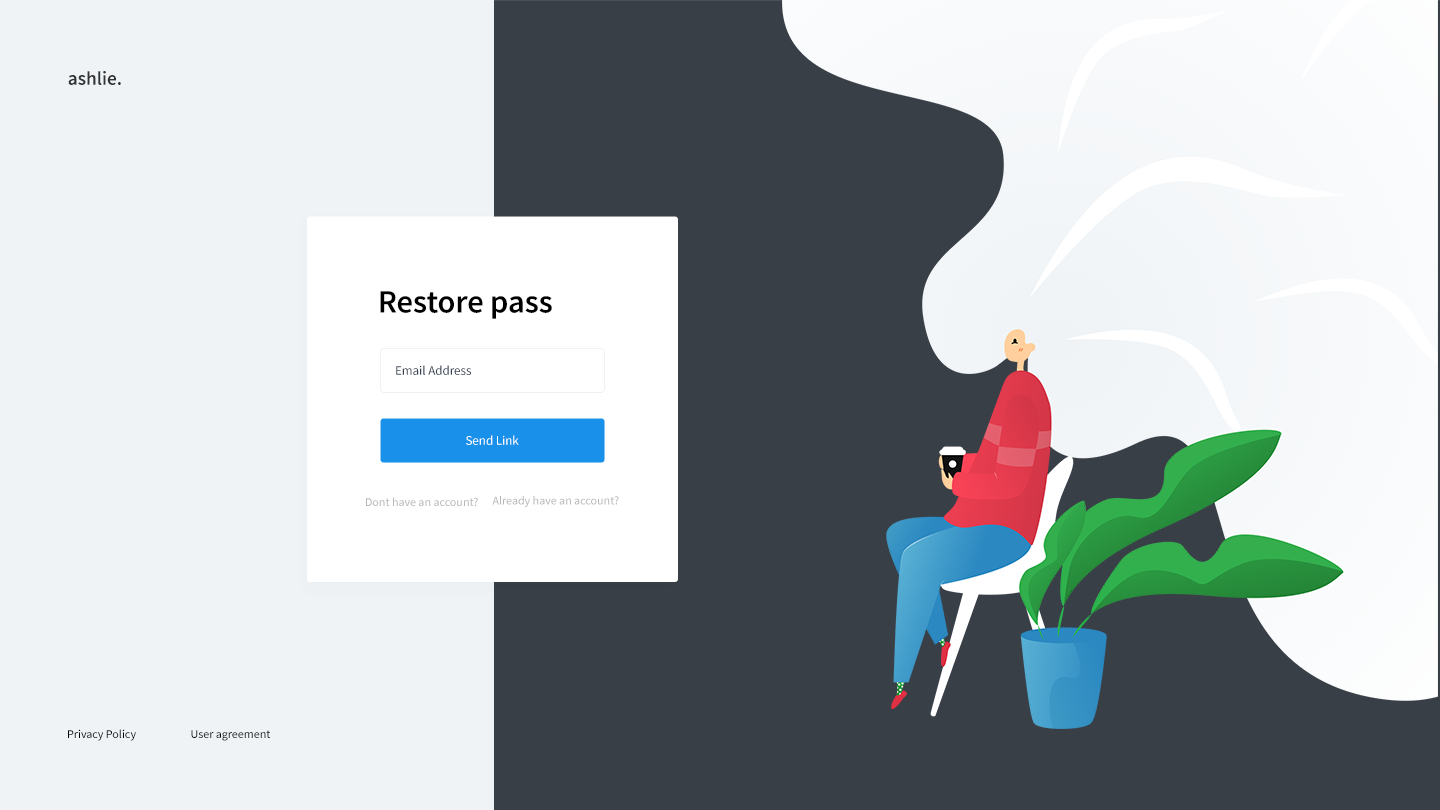
<style>
.page{position:relative;width:1440px;height:810px;background:#393f47}
.page>*{position:absolute;margin:0}
.t1{font:19.3px "SourceSansPro-SemiBold";color:#333333}
.t2{font:32.5px "SourceSansPro-SemiBold";color:#000000}
.t3{font:13px "SourceSansPro-Regular";color:#354052}
.t4{font:13px "SourceSansPro-Regular";color:#ffffff}
.t5{font:12px "SourceSansPro-Regular";color:#b6b6b6}
.t6{font:12px "SourceSansPro-Regular";color:#000000}
</style>
<div class="page">
<p class="t1" style="left:68px;top:71px;width:53px;height:14px">ashlie.</p>
<p class="t2" style="left:380px;top:291px;width:172px;height:28px">Restore pass</p>
<p class="t3" style="left:396px;top:365px;width:75px;height:10px">Email Address</p>
<p class="t4" style="left:466px;top:435px;width:53px;height:10px">Send Link</p>
<p class="t5" style="left:366px;top:497px;width:112px;height:9px">Dont have an account?</p>
<p class="t5" style="left:492px;top:496px;width:127px;height:11px">Already have an account?</p>
<p class="t6" style="left:68px;top:729px;width:68px;height:12px">Privacy Policy</p>
<p class="t6" style="left:191px;top:730px;width:80px;height:11px">User agreement</p>
</div>
